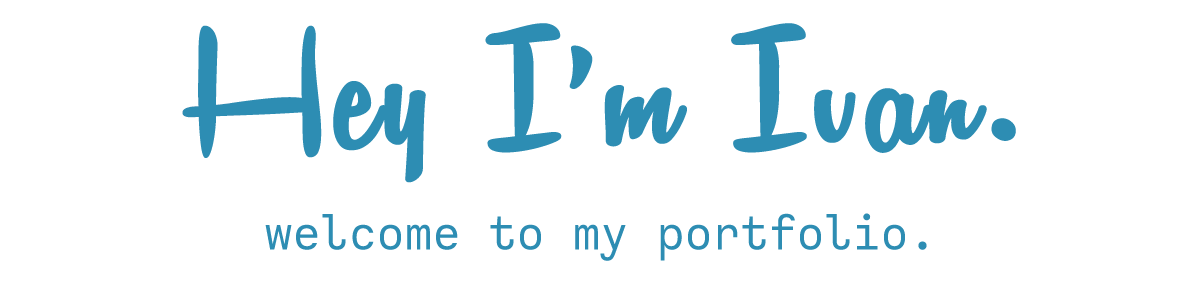
<style>
.page{position:relative;width:1200px;height:300px;background:#ffffff}
.page>*{position:absolute;margin:0}
.t1{font:200px "RemachineScriptPersonalUse";color:#2d8db3;font-weight:bold}
.t2{font:50px "CallingCode-Regular";color:#2d8db3}
</style>
<div class="page">
<p class="t1" style="left:182px;top:23px;width:834px;height:160px">Hey I’m Ivan.</p>
<p class="t2" style="left:265px;top:213px;width:662px;height:48px">welcome to my portfolio.</p>
</div>
